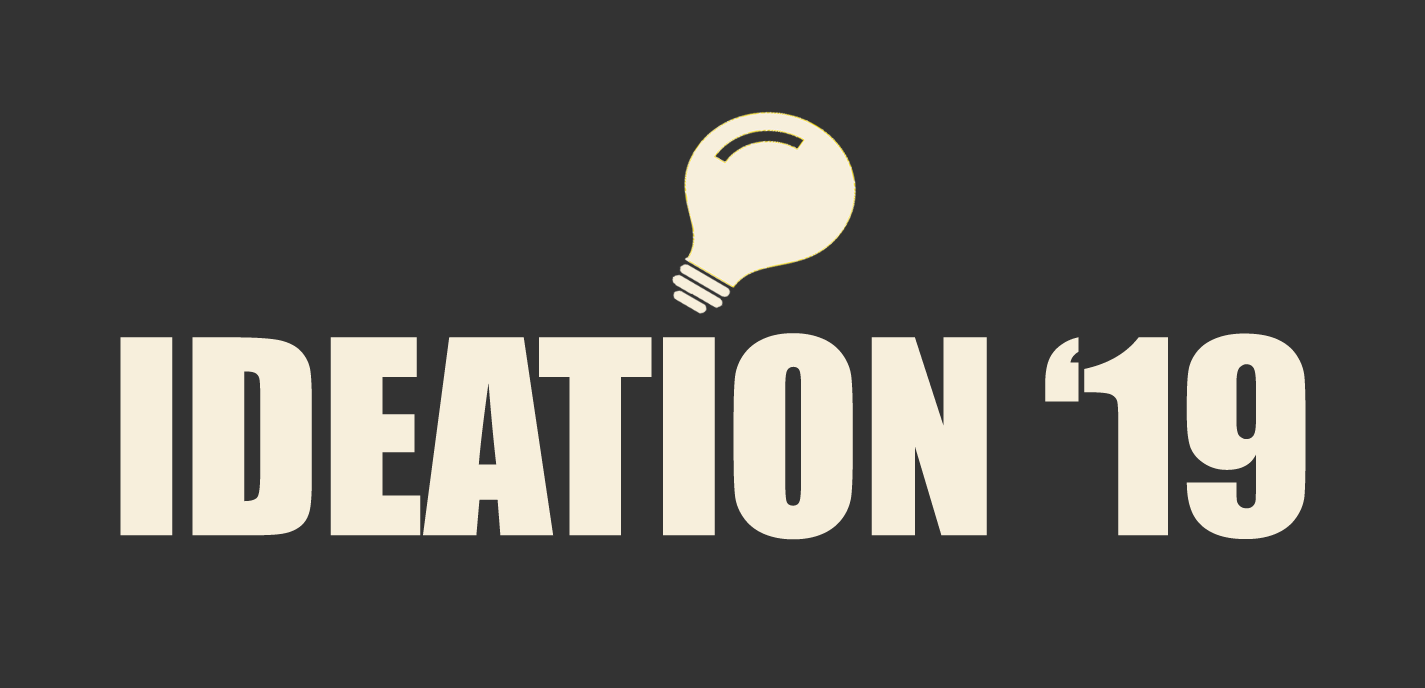
<style>
.page{position:relative;width:1425px;height:688px;background:#333333}
.page>*{position:absolute;margin:0}
.t1{font:250px "Impact";color:#f7efdc}
</style>
<div class="page">
<p class="t1" style="left:120px;top:333px;width:1186px;height:207px">IDEATION ‘19</p>
</div>
